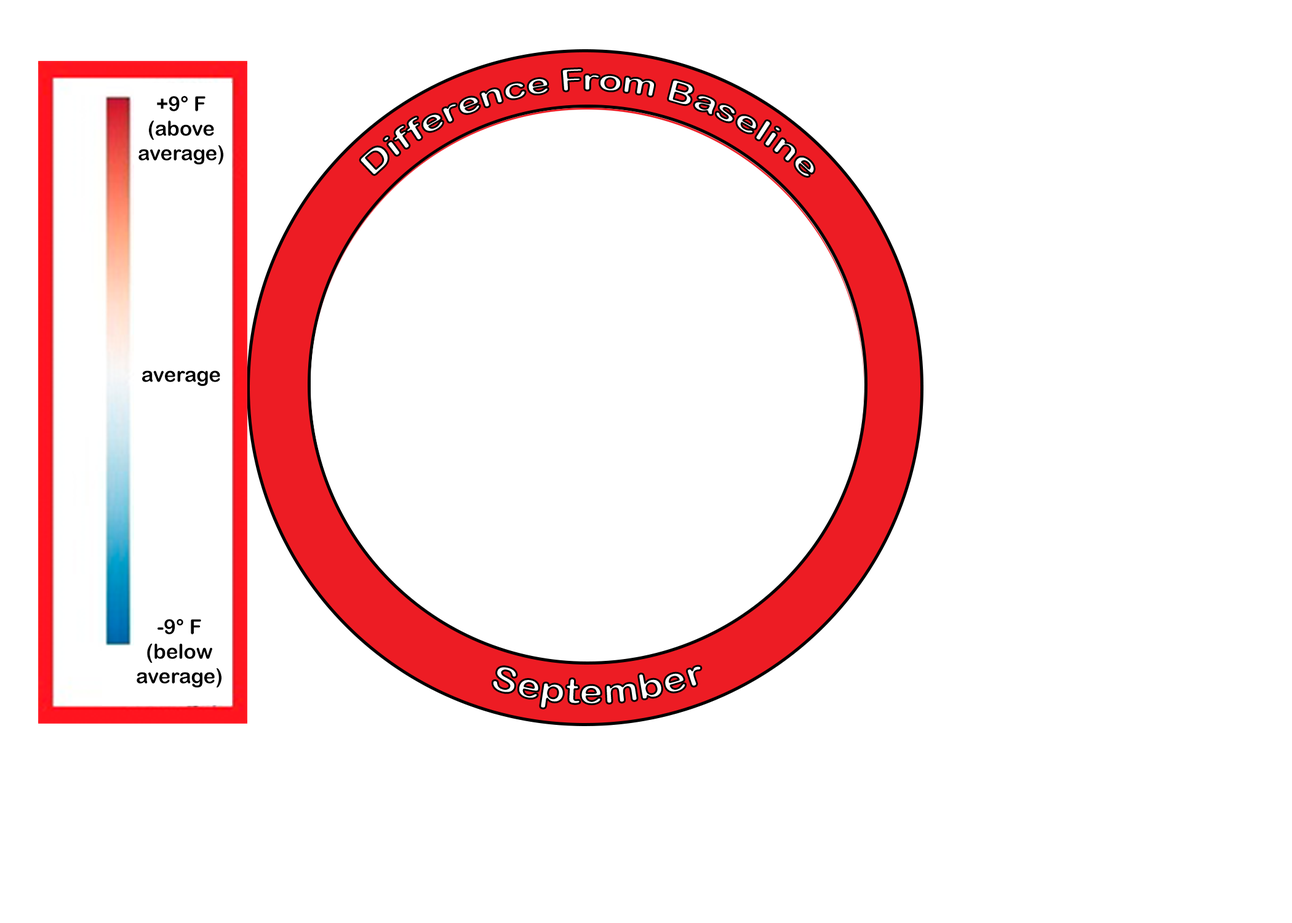
<style>
.page{position:relative;width:1292px;height:923px;background:#ffffff}
.page>*{position:absolute;margin:0}
.t1{font:20.5px "ArialRoundedMTBold";color:#000000}
.t2{font:35.9px "ArialRoundedMTBold"}
</style>
<div class="page">
<p class="t1" style="left:138px;top:96px;width:85px;height:69px;text-align:center">+9° F (above average)</p>
<p class="t1" style="left:142px;top:370px;width:78px;height:16px">average</p>
<p class="t1" style="left:137px;top:619px;width:84px;height:69px;text-align:center">-9° F (below average)</p>
<p class="t2" style="left:492px;top:666px;width:209px;height:43px;rotate:-2deg">September</p>
</div>
